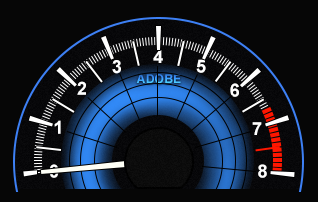
<style>
.page{position:relative;width:318px;height:202px;background:#060606}
.page>*{position:absolute;margin:0}
.t1{font:18px "Arial-BoldMT";letter-spacing:0.02em;color:#ffffff}
.t2{font:12px "Arial-BoldMT";letter-spacing:0.02em}
</style>
<div class="page">
<p class="t1" style="left:153px;top:50px;width:10px;height:13px">4</p>
<p class="t1" style="left:112px;top:60px;width:9px;height:14px">3</p>
<p class="t1" style="left:196px;top:59px;width:10px;height:14px">5</p>
<p class="t2" style="left:136px;top:74px;width:45px;height:10px">ADOBE</p>
<p class="t1" style="left:77px;top:81px;width:9px;height:14px">2</p>
<p class="t1" style="left:230px;top:83px;width:9px;height:14px">6</p>
<p class="t1" style="left:54px;top:120px;width:7px;height:14px">1</p>
<p class="t1" style="left:252px;top:122px;width:10px;height:13px">7</p>
<p class="t1" style="left:49px;top:164px;width:10px;height:14px">0</p>
<p class="t1" style="left:258px;top:164px;width:9px;height:14px">8</p>
</div>
